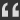
<style>
.page{position:relative;width:20px;height:20px;background:#333333}
.page>*{position:absolute;margin:0}
.t1{font:48px "SimHei";color:#dadada}
</style>
<div class="page">
<p class="t1" style="left:2px;top:2px;width:17px;height:15px">“</p>
</div>
